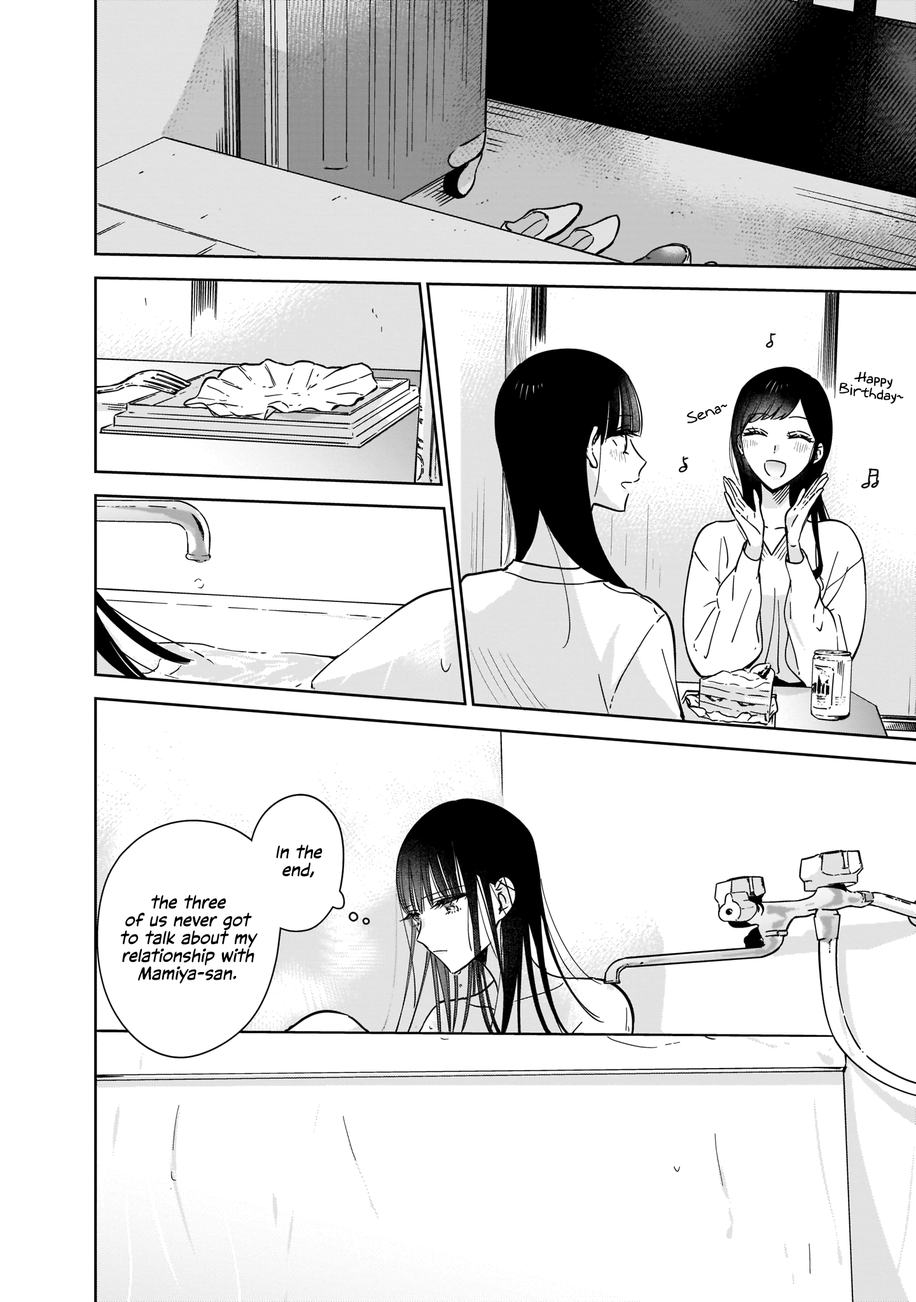
<style>
.page{position:relative;width:916px;height:1302px;background:#ffffff}
.page>*{position:absolute;margin:0}
.t1{font:14px "Augie";color:#000000}
.t2{font:17.8px "CCVictorySpeechLower-Regular";color:#000000;font-style:italic}
</style>
<div class="page">
<p class="t1" style="left:839px;top:372px;width:65px;height:32px;text-align:center;rotate:8deg">Happy<br>Birthday~</p>
<p class="t1" style="left:686px;top:404px;width:41px;height:19px;rotate:-20deg">Sena~</p>
<p class="t2" style="left:276px;top:844px;width:46px;height:34px;text-align:center">In the<br>end,</p>
<p class="t2" style="left:120px;top:895px;width:138px;height:89px;text-align:center">the three<br>of us never got<br>to talk about my<br>relationship with<br>Mamiya-san.</p>
</div>
